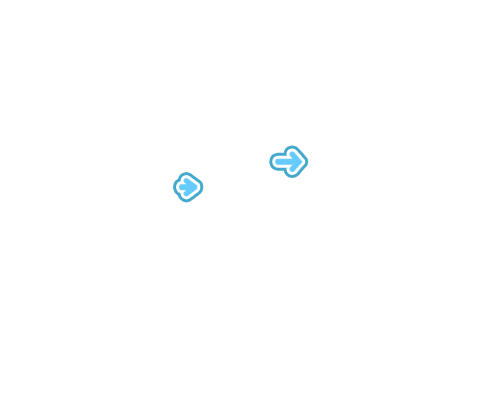
<style>
.page{position:relative;width:500px;height:400px;background:#ffffff}
.page>*{position:absolute;margin:0}
.t1{font:20px "JCkg";color:#66ccff}
</style>
<div class="page">
<p class="t1" style="left:179px;top:178px;width:19px;height:19px">➜</p>
<p class="t1" style="left:179px;top:178px;width:19px;height:19px">➜</p>
</div>
